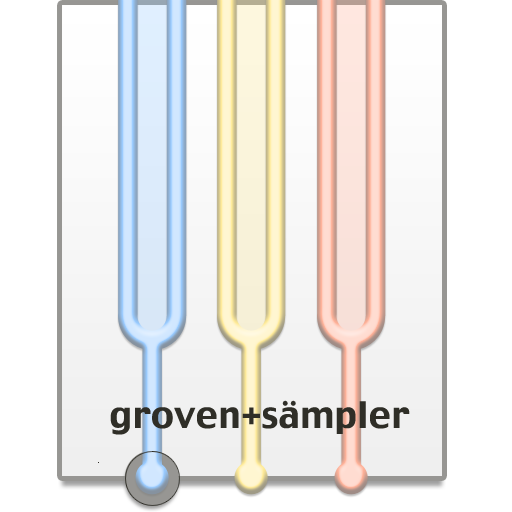
<style>
.page{position:relative;width:512px;height:512px;background:#ffffff}
.page>*{position:absolute;margin:0}
.t1{font:36px "Charcoal";color:#2f2e27}
</style>
<div class="page">
<p class="t1" style="left:110px;top:400px;width:300px;height:35px">groven+sämpler</p>
</div>
